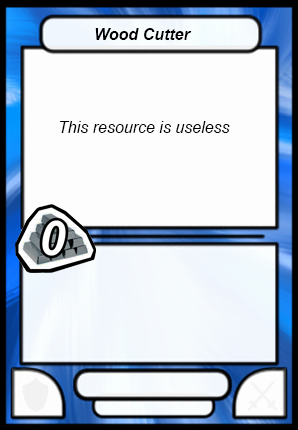
<style>
.page{position:relative;width:298px;height:430px;background:#fdfdfd}
.page>*{position:absolute;margin:0}
.t1{font:16px "Arial-BoldItalicMT";color:#000000}
.t2{font:16px "Arial-ItalicMT";color:#000000}
</style>
<div class="page">
<p class="t1" style="left:95px;top:28px;width:97px;height:12px">Wood Cutter</p>
<p class="t2" style="left:60px;top:121px;width:170px;height:12px">This resource is useless</p>
</div>
